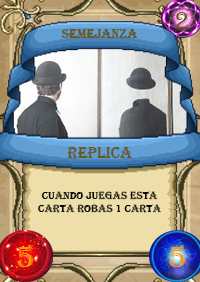
<style>
.page{position:relative;width:200px;height:282px}
.page>*{position:absolute;margin:0}
.t1{font:25px "Algerian";color:#6e4e1c}
.t2{font:13px "Algerian";color:#695720}
.t3{font:16px "Algerian";color:#695720}
.t4{font:11px "Algerian";color:#090909}
.t5{font:30px "Algerian";color:#f79906}
</style>
<div class="page">
<p class="t1" style="left:175px;top:12px;width:14px;height:17px">2</p>
<p class="t2" style="left:61px;top:29px;width:77px;height:10px">semejanza</p>
<p class="t3" style="left:67px;top:147px;width:66px;height:12px">replica</p>
<p class="t4" style="left:38px;top:191px;width:123px;height:22px;text-align:center">Cuando Juegas esta<br>carta robas 1 carta</p>
<p class="t5" style="left:17px;top:245px;width:17px;height:22px">5</p>
<p class="t5" style="left:169px;top:245px;width:17px;height:22px">5</p>
</div>
